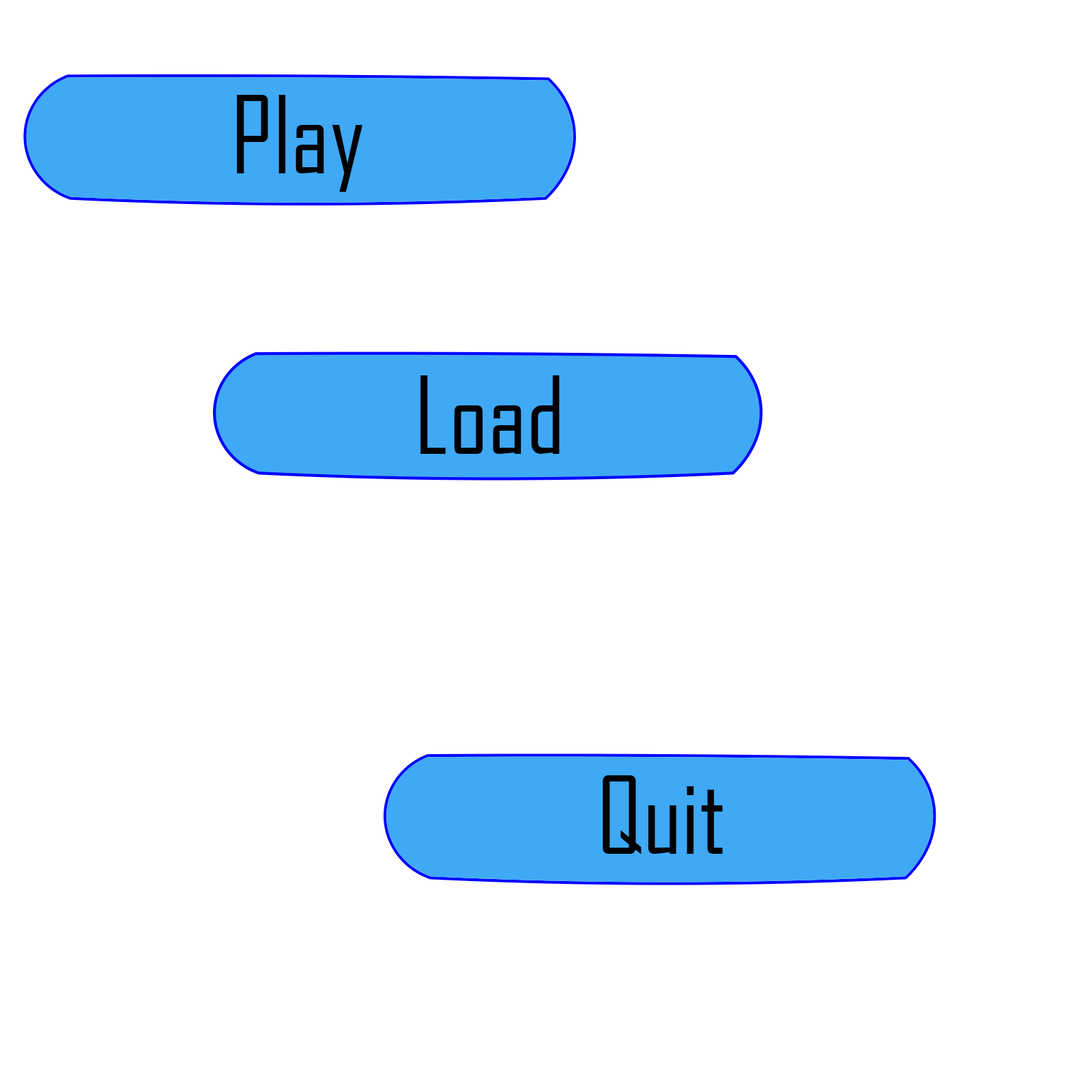
<style>
.page{position:relative;width:1092px;height:1092px;background:#ffffff}
.page>*{position:absolute;margin:0}
.t1{font:102.4px "AgencyFB-Reg";color:#000000}
</style>
<div class="page">
<p class="t1" style="left:237px;top:95px;width:126px;height:97px">Play</p>
<p class="t1" style="left:420px;top:375px;width:140px;height:79px">Load</p>
<p class="t1" style="left:603px;top:775px;width:120px;height:79px">Quit</p>
</div>
